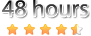
<style>
.page{position:relative;width:91px;height:36px;background:#ffffff}
.page>*{position:absolute;margin:0}
.t1{font:24px "MyriadPro-Regular"}
</style>
<div class="page">
<p class="t1" style="left:2px;top:0px;width:86px;height:17px">48 hours</p>
</div>
